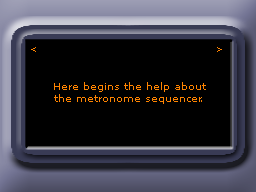
<style>
.page{position:relative;width:256px;height:192px;background:#000000}
.page>*{position:absolute;margin:0}
.t1{font:9px "MSReferenceSansSerif";color:#ff8400}
.t2{font:10px "MSReferenceSansSerif";color:#ff8400}
</style>
<div class="page">
<p class="t1" style="left:31px;top:47px;width:5px;height:5px">&lt;</p>
<p class="t1" style="left:217px;top:47px;width:5px;height:5px">&gt;</p>
<p class="t2" style="left:54px;top:82px;width:152px;height:22px;text-align:center">Here begins the help about<br>the metronome sequencer.</p>
</div>
